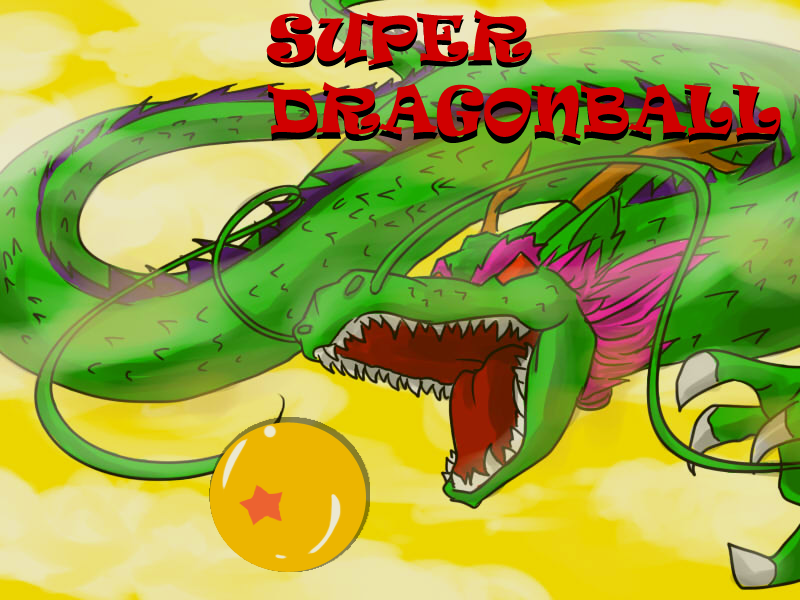
<style>
.page{position:relative;width:800px;height:600px}
.page>*{position:absolute;margin:0}
.t1{font:60px "Ravie";color:#d00000}
.t2{font:61.2px "Ravie"}
</style>
<div class="page">
<p class="t1" style="left:266px;top:10px;width:515px;height:129px">SUPER <br>DRAGONBALL</p>
<p class="t2" style="left:267px;top:14px;width:514px;height:131px">SUPER <br>DRAGONBALL</p>
</div>
